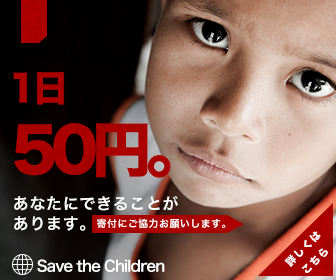
<style>
.page{position:relative;width:336px;height:280px}
.page>*{position:absolute;margin:0}
.t1{font:36px "HiraKakuStdN-W8";color:#ac0000}
.t2{font:60px "HiraKakuStdN-W8";letter-spacing:-0.1em;color:#aa0000}
.t3{font:16px/20px "HiraKakuProN-W6";letter-spacing:0.04em;color:#ffffff}
.t4{font:10px "HiraKakuProN-W6";letter-spacing:0.04em;color:#ffffff}
.t5{font:10px/17px "HiraKakuStdN-W8";letter-spacing:0.14em;color:#ffffff}
.t6{font:15px "HiraKakuProN-W6";letter-spacing:-0.06em;color:#ffffff}
</style>
<div class="page">
<p class="t1" style="left:13px;top:72px;width:51px;height:33px">1日</p>
<p class="t2" style="left:14px;top:123px;width:157px;height:55px">50円。</p>
<p class="t3" style="left:14px;top:196px;width:164px;height:35px">あなたにできることが<br>あります。</p>
<p class="t4" style="left:97px;top:218px;width:129px;height:11px">寄付にご協力お願いします。</p>
<p class="t5" style="left:284px;top:231px;width:44px;height:42px;text-align:center;rotate:-45deg">詳しくは<br>こちら</p>
<p class="t6" style="left:37px;top:259px;width:128px;height:13px">Save the Children</p>
</div>
